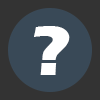
<style>
.page{position:relative;width:100px;height:100px;background:#394957}
.page>*{position:absolute;margin:0}
.t1{font:72px "ErasITC-Bold";color:#ffffff}
</style>
<div class="page">
<p class="t1" style="left:34px;top:26px;width:36px;height:49px">?</p>
</div>
